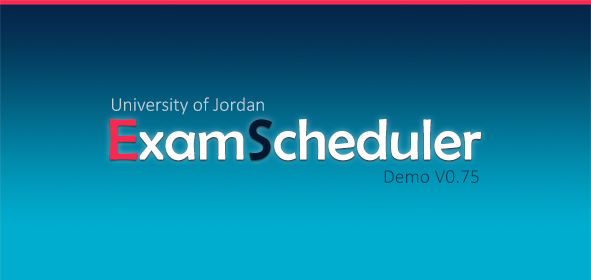
<style>
.page{position:relative;width:591px;height:280px}
.page>*{position:absolute;margin:0}
.t1{font:19.5px "Calibri-Light";color:#c2d2da}
.t2{font:58.6px "BerlinSansFB-Reg";color:#fefefe}
.t3{font:58.6px "BerlinSansFB-Reg";color:#f52a53}
.t4{font:58.6px "BerlinSansFB-Reg";color:#001933}
.t5{font:19.5px "Calibri-Light";color:#003b57}
</style>
<div class="page">
<p class="t1" style="left:112px;top:97px;width:152px;height:18px">University of Jordan</p>
<p class="t2" style="left:110px;top:119px;width:371px;height:42px"><span class="t3">E</span>xam<span class="t4">S</span>cheduler</p>
<p class="t5" style="left:384px;top:170px;width:95px;height:13px">Demo V0.75</p>
</div>
